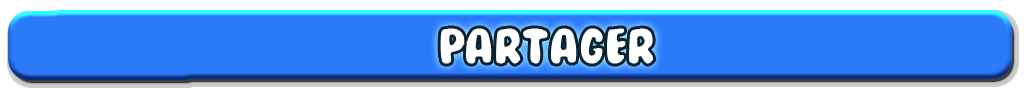
<style>
.page{position:relative;width:1024px;height:94px;background:#2c7af7}
.page>*{position:absolute;margin:0}
.t1{font:49.1px "BubbleGum";letter-spacing:-0.035em;color:#ffffff}
</style>
<div class="page">
<p class="t1" style="left:439px;top:27px;width:216px;height:38px">Partager</p>
</div>
